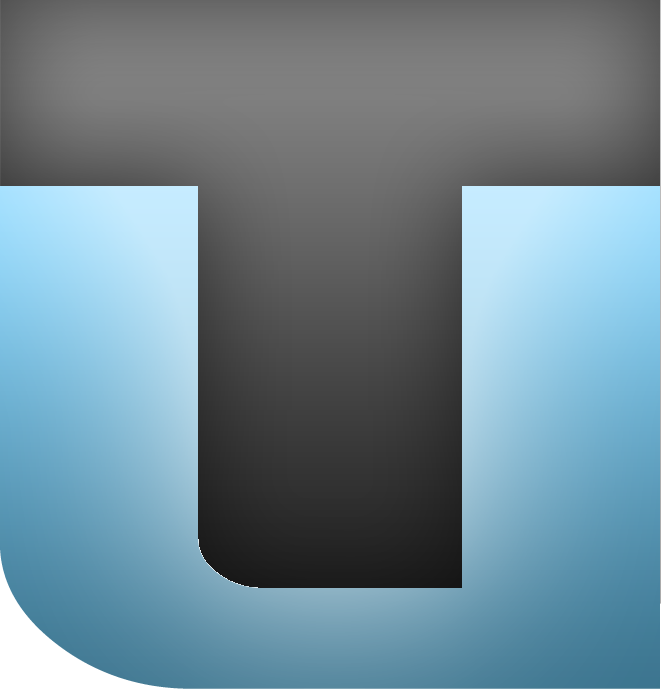
<style>
.page{position:relative;width:661px;height:689px}
.page>*{position:absolute;margin:0}
.t1{font:753.9px "Electrofied";letter-spacing:-0.025em;scale:1.31 1}
</style>
<div class="page">
<p class="t1" style="left:0px;top:186px;width:660px;height:503px">u</p>
</div>
